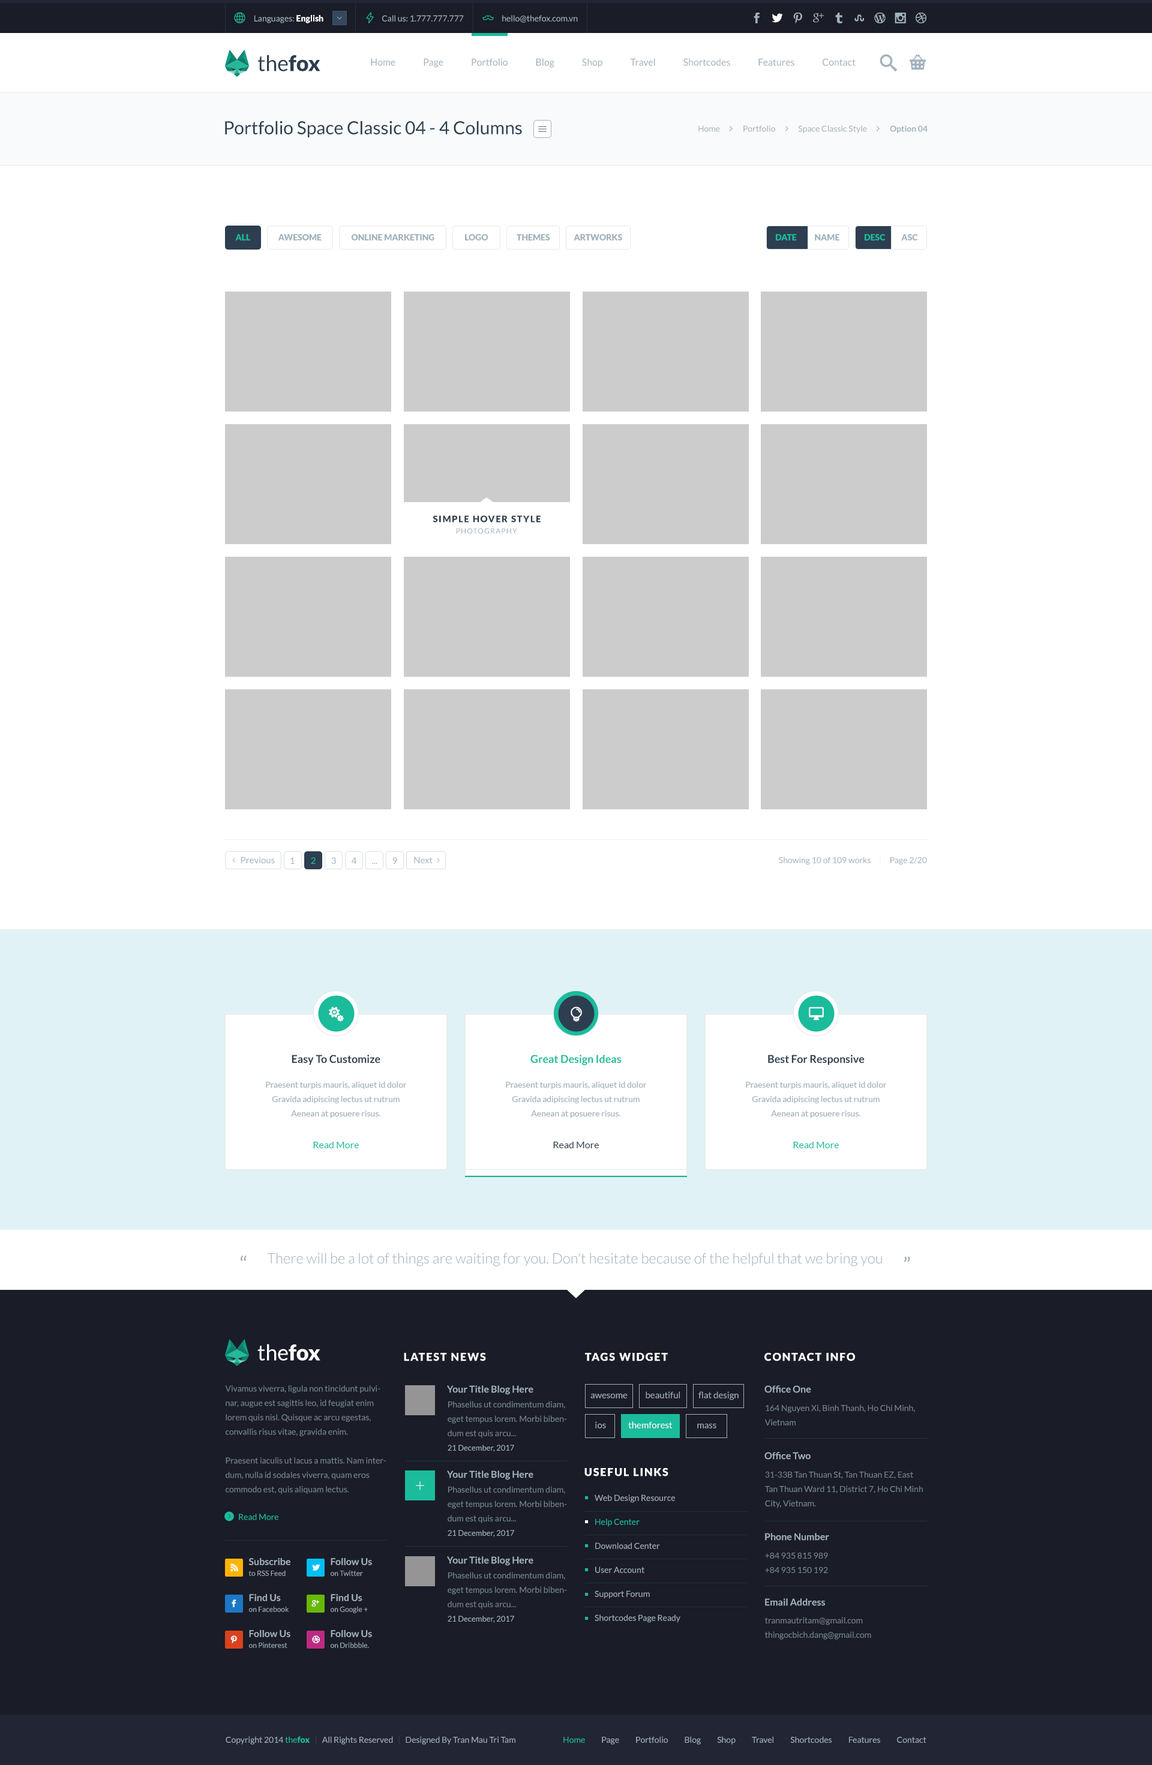
<style>
.page{position:relative;width:1152px;height:1765px;background:#ffffff}
.page>*{position:absolute;margin:0}
.t1{font:8.4px "Lato-Regular";color:#a1b1bc}
.t2{font:8.4px "Lato-Black";color:#ffffff}
.t3{font:21.6px "Lato-Regular";color:#2c3e50}
.t4{font:21.6px "Lato-Black";color:#2c3e50}
.t5{font:9.6px "Lato-Regular";color:#a1b1bc}
.t6{font:18px "Lato-Regular";color:#2c3e50}
.t7{font:8.4px "Lato-Bold";color:#a1b1bc}
.t8{font:8.4px "Lato-Black";color:#1abc9c}
.t9{font:8.4px "Lato-Black";color:#a1b1bc}
.t10{font:9px "Lato-Black";letter-spacing:0.1em;color:#2c3e50}
.t11{font:7.2px "Lato-Regular";letter-spacing:0.1em;color:#a1b1bc}
.t12{font:9px "Lato-Regular";color:#a1b1bc}
.t13{font:9px "Lato-Regular";color:#1abc9c}
.t14{font:8.4px "Lato-Regular";color:#ecf0f1}
.t15{font:10.8px "Lato-Bold";color:#2c3e50}
.t16{font:10.8px "Lato-Bold";color:#1abc9c}
.t17{font:8.4px/14.4px "Lato-Regular";color:#a1b1bc}
.t18{font:9.6px "Lato-Regular";color:#1abc9c}
.t19{font:9.6px "Lato-Regular";color:#2c3e50}
.t20{font:14.4px "Lato-Light";color:#a1b1bc}
.t21{font:21.6px "Lato-Regular";color:#a1b1bc}
.t22{font:21.8px "Lato-Regular";color:#a1b1bc}
.t23{font:21.6px "Lato-Regular";color:#ffffff}
.t24{font:21.6px "Lato-Black";color:#ffffff}
.t25{font:10.8px "Lato-Black";letter-spacing:0.1em;color:#ffffff;text-transform:uppercase}
.t26{font:8.4px/14.4px "Lato-Regular";color:#758590}
.t27{font:9.6px "Lato-Bold";color:#a1b1bc}
.t28{font:7.8px/14.4px "Lato-Regular";color:#a1b1bc}
.t29{font:9px "Lato-Regular";color:#ffffff}
.t30{font:18px "Lato-Light";color:#ffffff}
.t31{font:8.4px/24px "Lato-Regular";color:#a1b1bc}
.t32{font:8.4px/24px "Lato-Regular";color:#1abc9c}
.t33{font:8.4px "Lato-Regular";color:#1abc9c}
.t34{font:7.2px/10.8px "Lato-Regular";color:#a1b1bc}
.t35{font:9.6px/10.8px "Lato-Bold";color:#a1b1bc}
.t36{font:8.4px "Lato-Regular";color:#304253}
</style>
<div class="page">
<p class="t1" style="left:254px;top:15px;width:69px;height:8px">Languages: <span class="t2">English</span></p>
<p class="t1" style="left:382px;top:15px;width:82px;height:7px">Call us: 1.777.777.777</p>
<p class="t1" style="left:502px;top:15px;width:76px;height:8px">hello@thefox.com.vn</p>
<p class="t3" style="left:257px;top:55px;width:63px;height:16px">the<span class="t4">fox</span></p>
<p class="t5" style="left:371px;top:58px;width:485px;height:10px">Home               Page               Portfolio               Blog               Shop               Travel               Shortcodes               Features               Contact</p>
<p class="t6" style="left:225px;top:121px;width:297px;height:16px">Portfolio Space Classic 04 - 4 Columns</p>
<p class="t1" style="left:698px;top:125px;width:230px;height:8px">Home              Portfolio              Space Classic Style              <span class="t7">Option 04</span></p>
<p class="t8" style="left:235px;top:234px;width:15px;height:7px">ALL</p>
<p class="t9" style="left:278px;top:234px;width:44px;height:7px">AWESOME</p>
<p class="t9" style="left:351px;top:234px;width:83px;height:7px">ONLINE MARKETING</p>
<p class="t9" style="left:465px;top:234px;width:23px;height:7px">LOGO</p>
<p class="t9" style="left:517px;top:234px;width:33px;height:7px">THEMES</p>
<p class="t9" style="left:574px;top:234px;width:48px;height:7px">ARTWORKS</p>
<p class="t8" style="left:865px;top:234px;width:53px;height:7px">DESC<span class="t9">          ASC</span></p>
<p class="t10" style="left:433px;top:515px;width:108px;height:8px">SIMPLE HOVER STYLE</p>
<p class="t11" style="left:456px;top:528px;width:61px;height:6px">PHOTOGRAPHY</p>
<p class="t12" style="left:241px;top:857px;width:34px;height:6px">Previous</p>
<p class="t12" style="left:290px;top:857px;width:5px;height:7px">1</p>
<p class="t13" style="left:311px;top:857px;width:5px;height:7px">2</p>
<p class="t12" style="left:331px;top:857px;width:5px;height:7px">3</p>
<p class="t12" style="left:352px;top:857px;width:5px;height:7px">4</p>
<p class="t12" style="left:392px;top:857px;width:5px;height:7px">9</p>
<p class="t12" style="left:414px;top:857px;width:19px;height:6px">Next</p>
<p class="t1" style="left:779px;top:857px;width:148px;height:8px">Showing 10 of 109 works<span class="t14">     |     </span>Page 2/20</p>
<p class="t12" style="left:372px;top:863px;width:5px;height:1px">...</p>
<p class="t15" style="left:292px;top:1055px;width:88px;height:10px">Easy To Customize</p>
<p class="t16" style="left:530px;top:1055px;width:91px;height:11px">Great Design Ideas</p>
<p class="t15" style="left:768px;top:1055px;width:97px;height:10px">Best For Responsive</p>
<p class="t17" style="left:266px;top:1082px;width:141px;height:36px;text-align:center">Praesent turpis mauris, aliquet id dolor<br>Gravida adipiscing lectus ut rutrum <br>Aenean at posuere risus.</p>
<p class="t17" style="left:506px;top:1082px;width:141px;height:36px;text-align:center">Praesent turpis mauris, aliquet id dolor<br>Gravida adipiscing lectus ut rutrum <br>Aenean at posuere risus.</p>
<p class="t17" style="left:746px;top:1082px;width:141px;height:36px;text-align:center">Praesent turpis mauris, aliquet id dolor<br>Gravida adipiscing lectus ut rutrum <br>Aenean at posuere risus.</p>
<p class="t18" style="left:313px;top:1142px;width:46px;height:6px">Read More</p>
<p class="t19" style="left:553px;top:1142px;width:46px;height:6px">Read More</p>
<p class="t18" style="left:793px;top:1142px;width:46px;height:6px">Read More</p>
<p class="t20" style="left:267px;top:1253px;width:615px;height:14px">There will be a lot of things are waiting for you. Don't hesitate because of the helpful that we bring you</p>
<p class="t21" style="left:241px;top:1255px;width:6px;height:6px">“</p>
<p class="t22" style="left:904px;top:1256px;width:6px;height:6px;rotate:180deg">“</p>
<p class="t23" style="left:257px;top:1344px;width:63px;height:17px">the<span class="t24">fox</span></p>
<p class="t25" style="left:404px;top:1353px;width:82px;height:8px">Latest News</p>
<p class="t25" style="left:585px;top:1353px;width:83px;height:8px">TAGS WIDGET</p>
<p class="t25" style="left:764px;top:1353px;width:91px;height:8px">CONTACT INFO</p>
<p class="t26" style="left:225px;top:1385px;width:161px;height:109px">Vivamus viverra, ligula non tincidunt pulvinar, augue est sagittis leo, id feugiat enim lorem quis nisl. Quisque ac arcu egestas, convallis risus vitae, gravida enim. <br><br>Praesent iaculis ut lacus a mattis. Nam interdum, nulla id sodales viverra, quam eros commodo est, quis aliquam lectus.</p>
<p class="t27" style="left:447px;top:1385px;width:86px;height:10px">Your Title Blog Here</p>
<p class="t27" style="left:764px;top:1385px;width:47px;height:8px">Office One</p>
<p class="t12" style="left:590px;top:1394px;width:38px;height:5px">awesome</p>
<p class="t12" style="left:646px;top:1391px;width:34px;height:8px">beautiful</p>
<p class="t12" style="left:698px;top:1391px;width:41px;height:9px">flat design</p>
<p class="t26" style="left:448px;top:1401px;width:119px;height:51px">Phasellus ut condimentum diam, eget tempus lorem. Morbi bibendum est quis arcu...<br><span class="t28">21 December, 2017</span></p>
<p class="t26" style="left:764px;top:1405px;width:151px;height:21px">164 Nguyen Xi, Binh Thanh, Ho Chi Minh, Vietnam</p>
<p class="t12" style="left:595px;top:1421px;width:11px;height:8px">ios</p>
<p class="t29" style="left:628px;top:1421px;width:45px;height:8px">themforest</p>
<p class="t12" style="left:697px;top:1424px;width:19px;height:5px">mass</p>
<p class="t27" style="left:764px;top:1452px;width:47px;height:8px">Office Two</p>
<p class="t25" style="left:584px;top:1468px;width:84px;height:9px">USEFUL LINKS</p>
<p class="t30" style="left:416px;top:1481px;width:8px;height:9px">+</p>
<p class="t27" style="left:447px;top:1471px;width:86px;height:9px">Your Title Blog Here</p>
<p class="t26" style="left:765px;top:1471px;width:158px;height:37px">31-33B Tan Thuan St, Tan Thuan EZ, East Tan Thuan Ward 11, District 7, Ho Chi Minh City, Vietnam.</p>
<p class="t26" style="left:448px;top:1486px;width:119px;height:51px">Phasellus ut condimentum diam, eget tempus lorem. Morbi bibendum est quis arcu...<br><span class="t28">21 December, 2017</span></p>
<p class="t31" style="left:595px;top:1495px;width:85px;height:128px">Web Design Resource<br><span class="t32">Help Center<br></span>Download Center<br>User Account<br>Support Forum<br>Shortcodes Page Ready</p>
<p class="t33" style="left:239px;top:1514px;width:39px;height:6px">Read More</p>
<p class="t27" style="left:765px;top:1533px;width:64px;height:8px">Phone Number</p>
<p class="t26" style="left:765px;top:1553px;width:63px;height:20px">+84 935 815 989<br>+84 935 150 192</p>
<p class="t34" style="left:248px;top:1558px;width:42px;height:18px"><span class="t35">Subscribe<br></span>to RSS Feed</p>
<p class="t34" style="left:331px;top:1558px;width:41px;height:18px"><span class="t35">Follow Us<br></span>on Twitter</p>
<p class="t27" style="left:447px;top:1556px;width:86px;height:10px">Your Title Blog Here</p>
<p class="t26" style="left:448px;top:1572px;width:119px;height:51px">Phasellus ut condimentum diam, eget tempus lorem. Morbi bibendum est quis arcu...<br><span class="t28">21 December, 2017</span></p>
<p class="t34" style="left:249px;top:1594px;width:40px;height:18px"><span class="t35">Find Us<br></span>on Facebook</p>
<p class="t34" style="left:331px;top:1594px;width:37px;height:19px"><span class="t35">Find Us<br></span>on Google +</p>
<p class="t27" style="left:765px;top:1598px;width:60px;height:8px">Email Address</p>
<p class="t26" style="left:765px;top:1617px;width:106px;height:23px">tranmautritam@gmail.com<br>thingocbich.dang@gmail.com</p>
<p class="t34" style="left:249px;top:1630px;width:41px;height:18px"><span class="t35">Follow Us<br></span>on Pinterest</p>
<p class="t34" style="left:331px;top:1630px;width:41px;height:18px"><span class="t35">Follow Us<br></span>on Dribbble.</p>
<p class="t1" style="left:226px;top:1736px;width:289px;height:9px">Copyright 2014 <span class="t33">the</span><span class="t8">fox</span><span class="t36">   |   </span>All Rights Reserved<span class="t36">   |   </span>Designed By Tran Mau Tri Tam</p>
<p class="t1" style="left:563px;top:1736px;width:363px;height:9px"><span class="t33">Home</span>          Page          Portfolio          Blog          Shop          Travel          Shortcodes          Features          Contact</p>
</div>
